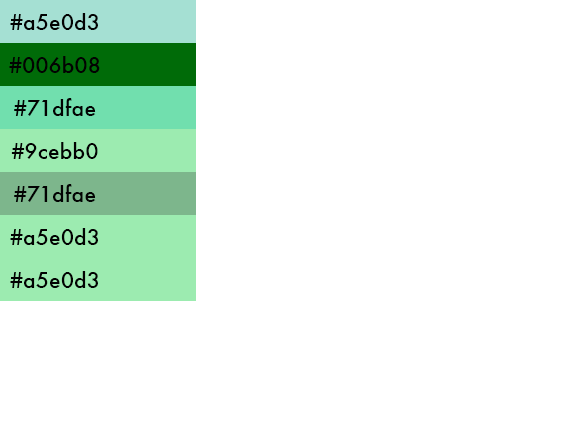
<style>
.page{position:relative;width:576px;height:432px;background:#ffffff}
.page>*{position:absolute;margin:0}
.t1{font:21.4px "Futura-Medium";color:#020202}
</style>
<div class="page">
<p class="t1" style="left:10px;top:13px;width:88px;height:17px">#a5e0d3</p>
<p class="t1" style="left:9px;top:56px;width:91px;height:17px">#006b08</p>
<p class="t1" style="left:14px;top:98px;width:82px;height:18px">#71dfae</p>
<p class="t1" style="left:11px;top:142px;width:87px;height:17px">#9cebb0</p>
<p class="t1" style="left:14px;top:184px;width:82px;height:18px">#71dfae</p>
<p class="t1" style="left:10px;top:228px;width:88px;height:17px">#a5e0d3</p>
<p class="t1" style="left:10px;top:271px;width:88px;height:17px">#a5e0d3</p>
</div>
